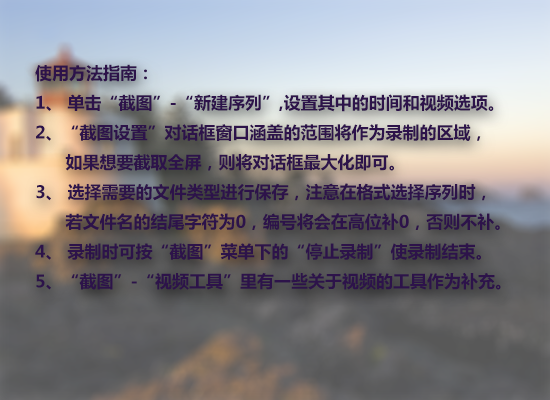
<style>
.page{position:relative;width:550px;height:400px}
.page>*{position:absolute;margin:0}
.t1{font:17px "MicrosoftYaHei-Bold";color:#2d134a}
</style>
<div class="page">
<p class="t1" style="left:35px;top:64px;width:466px;height:226px">使用方法指南：<br>1、 单击“截图”-“新建序列”,设置其中的时间和视频选项。<br>2、“截图设置”对话框窗口涵盖的范围将作为录制的区域，<br>      如果想要截取全屏，则将对话框最大化即可。<br>3、 选择需要的文件类型进行保存，注意在格式选择序列时，<br>      若文件名的结尾字符为0，编号将会在高位补0，否则不补。<br>4、 录制时可按“截图”菜单下的“停止录制”使录制结束。<br>5、“截图”-“视频工具”里有一些关于视频的工具作为补充。</p>
</div>
